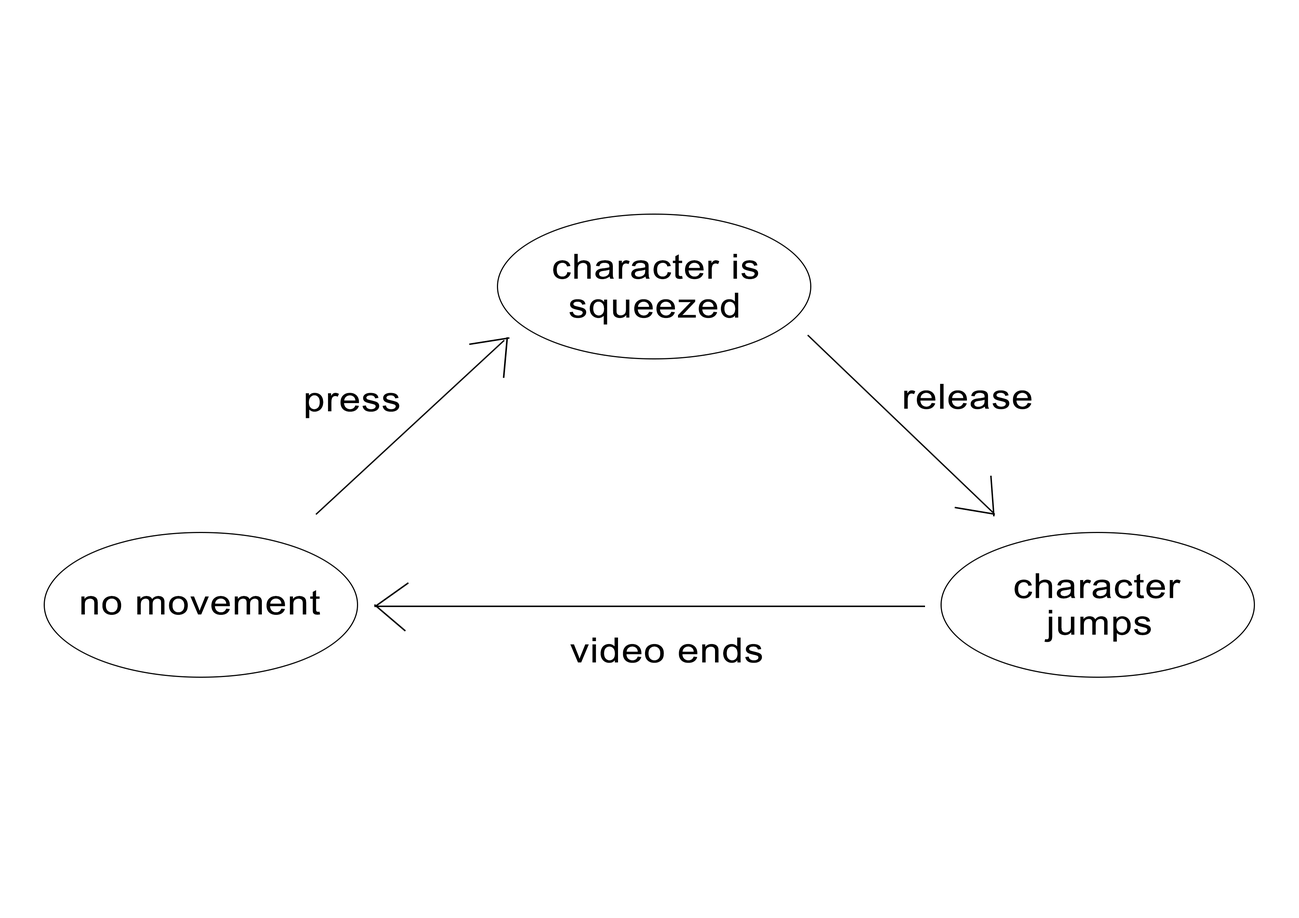
<style>
.page{position:relative;width:1299px;height:918px;background:#ffffff}
.page>*{position:absolute;margin:0}
.t1{font:34.7px "ArialMT";letter-spacing:0.02em;color:#000000;scale:1.11 1}
</style>
<div class="page">
<p class="t1" style="left:553px;top:254px;width:205px;height:26px">character is</p>
<p class="t1" style="left:569px;top:292px;width:169px;height:33px">squeezed</p>
<p class="t1" style="left:904px;top:384px;width:127px;height:25px">release</p>
<p class="t1" style="left:305px;top:393px;width:94px;height:25px">press</p>
<p class="t1" style="left:1014px;top:573px;width:167px;height:26px">character</p>
<p class="t1" style="left:81px;top:590px;width:239px;height:25px">no movement</p>
<p class="t1" style="left:1044px;top:610px;width:107px;height:32px">jumps</p>
<p class="t1" style="left:570px;top:638px;width:192px;height:25px">video ends</p>
</div>
